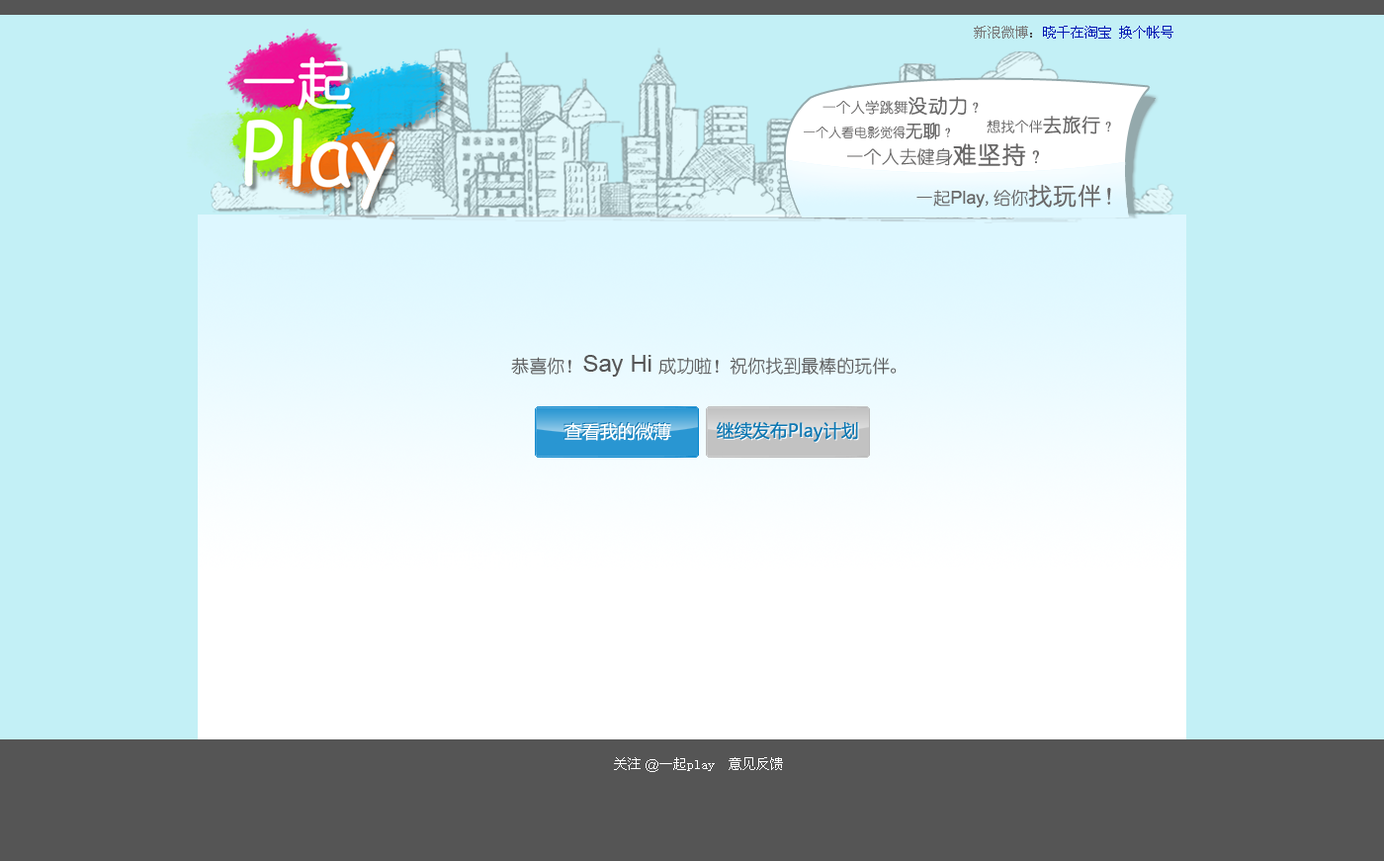
<style>
.page{position:relative;width:1384px;height:861px;background:#c3f0f6}
.page>*{position:absolute;margin:0}
.t1{font:13.8px "SimSun";color:#0015b1}
.t2{font:13.8px "SimSun";color:#797979}
.t3{font:13.8px "SimSun";color:#484848}
.t4{font:14.4px "YouYuan";color:#696868}
.t5{font:19.2px "YouYuan";color:#696868;font-weight:bold}
.t6{font:12.8px "YouYuan";color:#696868}
.t7{font:17.1px "YouYuan";color:#696868;font-weight:bold}
.t8{font:14px "YouYuan";color:#696868}
.t9{font:18.7px "YouYuan";color:#696868;font-weight:bold}
.t10{font:17.8px "YouYuan";color:#696868}
.t11{font:23.7px "YouYuan";color:#696868;font-weight:bold}
.t12{font:17.8px "ArialMT";color:#696868}
.t13{font:23.7px "YouYuan";color:#696868}
.t14{font:17.8px "YouYuan";color:#555555}
.t15{font:23.7px "ArialMT";color:#555555}
.t16{font:17.8px "MicrosoftYaHei"}
.t17{font:17.8px "MicrosoftYaHei";color:#ffffff}
.t18{font:17.8px "MicrosoftYaHei";color:#0f78b2}
.t19{font:13.8px "SimSun";color:#ffffff}
.t20{font:13.8px "ArialMT";color:#ffffff}
</style>
<div class="page">
<p class="t1" style="left:974px;top:26px;width:200px;height:13px"><span class="t2">新浪微博</span><span class="t3">：</span>晓千在淘宝 换个帐号</p>
<p class="t4" style="left:823px;top:96px;width:156px;height:20px">一个人学跳舞<span class="t5">没动力</span>？</p>
<p class="t6" style="left:804px;top:123px;width:146px;height:16px">一个人看电影觉得<span class="t7">无聊</span>？</p>
<p class="t8" style="left:987px;top:116px;width:125px;height:18px">想找个伴<span class="t9">去旅行</span>？</p>
<p class="t10" style="left:847px;top:143px;width:192px;height:23px">一个人去健身<span class="t11">难坚持</span>？</p>
<p class="t12" style="left:917px;top:184px;width:195px;height:24px"><span class="t10">一起</span>Play<span class="t10">,给你</span><span class="t11">找玩伴</span><span class="t13">！</span></p>
<p class="t14" style="left:511px;top:355px;width:386px;height:22px">恭喜你！<span class="t15">Say Hi </span>成功啦！祝你找到最棒的玩伴。</p>
<p class="t16" style="left:564px;top:422px;width:106px;height:18px">查看我的微薄</p>
<p class="t17" style="left:565px;top:423px;width:106px;height:18px">查看我的微薄</p>
<p class="t18" style="left:717px;top:421px;width:141px;height:21px">继续发布Play计划</p>
<p class="t16" style="left:718px;top:422px;width:141px;height:21px">继续发布Play计划</p>
<p class="t19" style="left:614px;top:757px;width:169px;height:15px">关注<span class="t20"> @</span>一起play  意见反馈</p>
</div>
